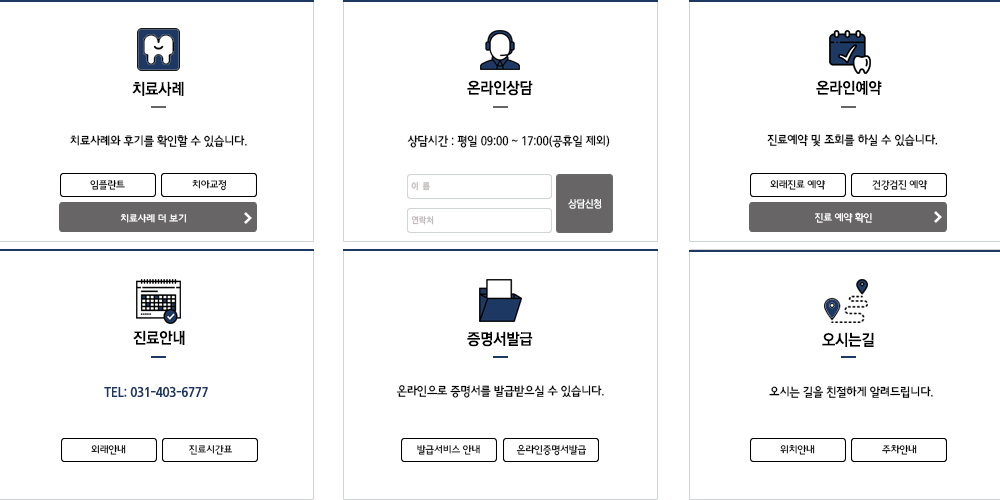
<style>
.page{position:relative;width:1000px;height:500px;background:#ffffff}
.page>*{position:absolute;margin:0}
.t1{font:15.7px "RixGoB";letter-spacing:-0.015em;color:#000000;scale:0.94 1}
.t2{font:12.2px "RixBGM";letter-spacing:-0.015em;color:#000000;scale:0.93 1}
.t3{font:12.3px "RixBGM";letter-spacing:-0.015em;color:#000000;scale:0.93 1}
.t4{font:10.2px "RixBGL";letter-spacing:-0.015em;color:#000000;scale:0.96 1}
.t5{font:10.2px "RixBGL";letter-spacing:-0.015em;scale:0.96 1}
.t6{font:9px "RixMGoEB";letter-spacing:-0.015em;color:#c4bcbc;scale:0.91 1}
.t7{font:10.4px "RixGoL";letter-spacing:-0.015em;color:#ffffff;scale:0.91 1}
.t8{font:10.2px "RixBGL";letter-spacing:-0.015em;color:#ffffff;scale:0.96 1}
.t9{font:13px "RixBGB";letter-spacing:-0.015em;color:#1d3963;scale:0.95 1}
</style>
<div class="page">
<p class="t1" style="left:132px;top:81px;width:52px;height:15px">치료사례</p>
<p class="t1" style="left:467px;top:80px;width:66px;height:16px">온라인상담</p>
<p class="t1" style="left:816px;top:80px;width:66px;height:15px">온라인예약</p>
<p class="t2" style="left:70px;top:135px;width:177px;height:13px">치료사례와 후기를 확인할 수 있습니다.</p>
<p class="t3" style="left:407px;top:135px;width:203px;height:13px">상담시간 : 평일 09:00 ~ 17:00(공휴일 제외)</p>
<p class="t2" style="left:767px;top:134px;width:171px;height:13px">진료예약 및 조회를 하실 수 있습니다.</p>
<p class="t4" style="left:90px;top:180px;width:35px;height:10px">임플란트</p>
<p class="t5" style="left:192px;top:180px;width:34px;height:11px">치아교정</p>
<p class="t6" style="left:411px;top:182px;width:19px;height:9px">이  름</p>
<p class="t5" style="left:770px;top:180px;width:56px;height:10px">외래진료 예약</p>
<p class="t5" style="left:872px;top:180px;width:56px;height:11px">건강검진 예약</p>
<p class="t7" style="left:568px;top:199px;width:34px;height:10px">상담신청</p>
<p class="t8" style="left:120px;top:214px;width:66px;height:9px">치료사례 더 보기</p>
<p class="t6" style="left:411px;top:216px;width:23px;height:9px">연락처</p>
<p class="t8" style="left:815px;top:212px;width:57px;height:11px">진료 예약 확인</p>
<p class="t1" style="left:133px;top:330px;width:52px;height:15px">진료안내</p>
<p class="t1" style="left:467px;top:331px;width:66px;height:16px">증명서발급</p>
<p class="t1" style="left:822px;top:332px;width:52px;height:15px">오시는길</p>
<p class="t9" style="left:104px;top:386px;width:104px;height:12px">TEL: 031-403-6777</p>
<p class="t2" style="left:396px;top:385px;width:208px;height:13px">온라인으로 증명서를 발급받으실 수 있습니다.</p>
<p class="t2" style="left:769px;top:385px;width:164px;height:13px">오시는 길을 친절하게 알려드립니다.</p>
<p class="t4" style="left:91px;top:445px;width:35px;height:10px">외래안내</p>
<p class="t4" style="left:189px;top:445px;width:44px;height:10px">진료시간표</p>
<p class="t5" style="left:417px;top:445px;width:63px;height:10px">발급서비스 안내</p>
<p class="t4" style="left:516px;top:444px;width:71px;height:12px">온라인증명서발급</p>
<p class="t4" style="left:780px;top:445px;width:35px;height:10px">위치안내</p>
<p class="t4" style="left:882px;top:445px;width:35px;height:10px">주차안내</p>
</div>
